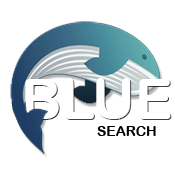
<style>
.page{position:relative;width:175px;height:175px;background:#ffffff}
.page>*{position:absolute;margin:0}
.t1{font:55.8px "ArialRoundedMTBold";color:#ffffff}
.t2{font:14px "ArialRoundedMTBold";color:#000000}
</style>
<div class="page">
<p class="t1" style="left:25px;top:78px;width:146px;height:41px">BLUE</p>
<p class="t2" style="left:97px;top:126px;width:59px;height:10px">SEARCH</p>
</div>
